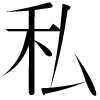
<style>
.page{position:relative;width:100px;height:100px;background:#ffffff}
.page>*{position:absolute;margin:0}
.t1{font:98px "Kochi-Mincho";color:#000000}
</style>
<div class="page">
<p class="t1" style="left:2px;top:2px;width:95px;height:94px">私</p>
</div>
